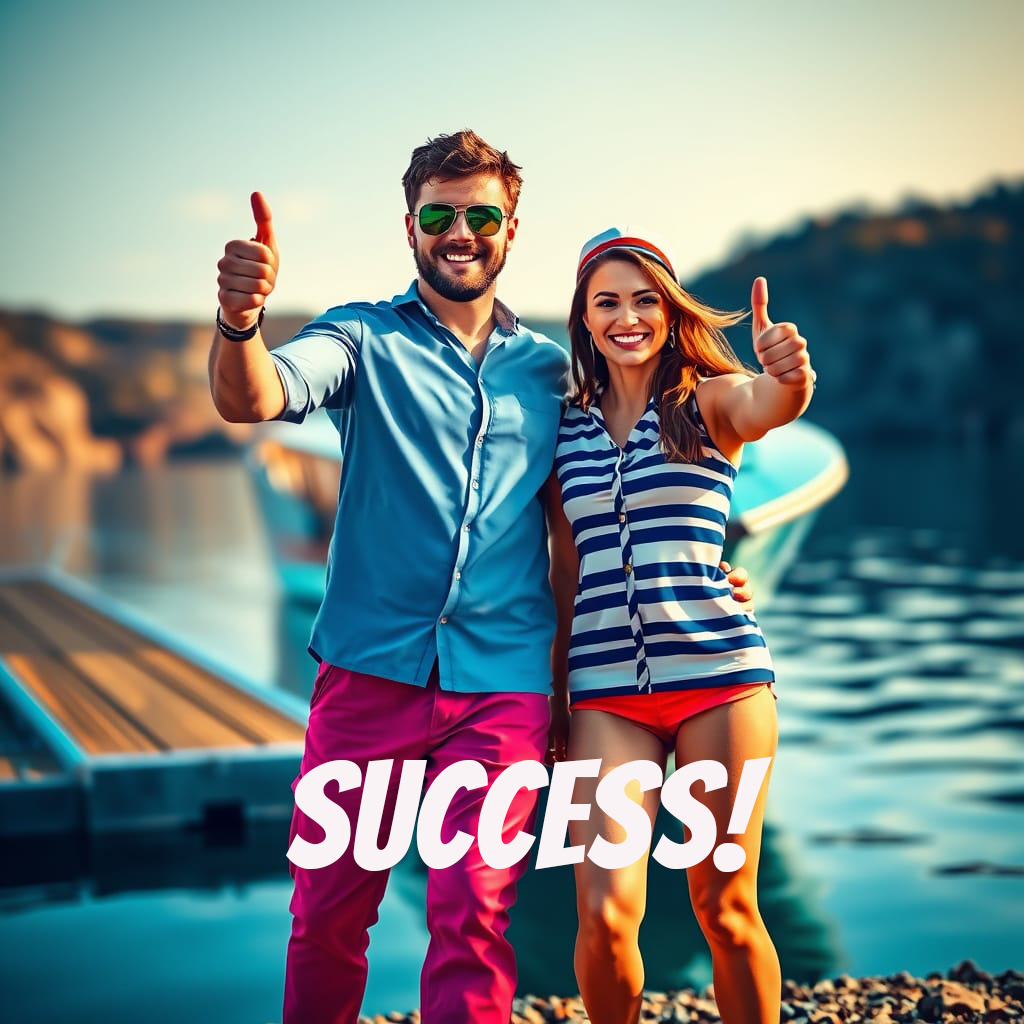
<style>
.page{position:relative;width:1024px;height:1024px}
.page>*{position:absolute;margin:0}
.t1{font:150px "Bangers-Regular";color:#f9f3f6;text-transform:uppercase}
</style>
<div class="page">
<p class="t1" style="left:286px;top:756px;width:487px;height:116px">Success!</p>
</div>
